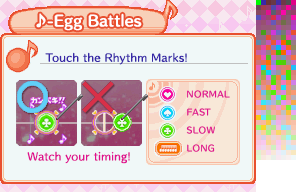
<style>
.page{position:relative;width:296px;height:192px;background:#f0f8f8}
.page>*{position:absolute;margin:0}
.t1{font:14px "HummingStd-B";letter-spacing:0.02em;color:#ffffff}
.t2{font:10px "HummingStd-D";letter-spacing:0.02em;color:#3828a8}
.t3{font:8px/18px "HummingStd-D";letter-spacing:0.05em;color:#e12393;text-transform:uppercase}
.t4{font:8px/18px "HummingStd-D";letter-spacing:0.05em;color:#e01090;text-transform:uppercase}
.t5{font:10px "HummingStd-D";letter-spacing:0.02em;color:#e01090}
</style>
<div class="page">
<p class="t1" style="left:36px;top:13px;width:106px;height:18px">♪-Egg Battles</p>
<p class="t2" style="left:45px;top:52px;width:142px;height:13px">Touch the Rhythm Marks!</p>
<p class="t3" style="left:186px;top:90px;width:44px;height:62px">Normal<br>Fast<br>Slow<br>Long</p>
<p class="t4" style="left:187px;top:90px;width:43px;height:62px">Normal<br>Fast<br>Slow<br>Long</p>
<p class="t5" style="left:27px;top:151px;width:103px;height:13px">Watch your timing!</p>
</div>
